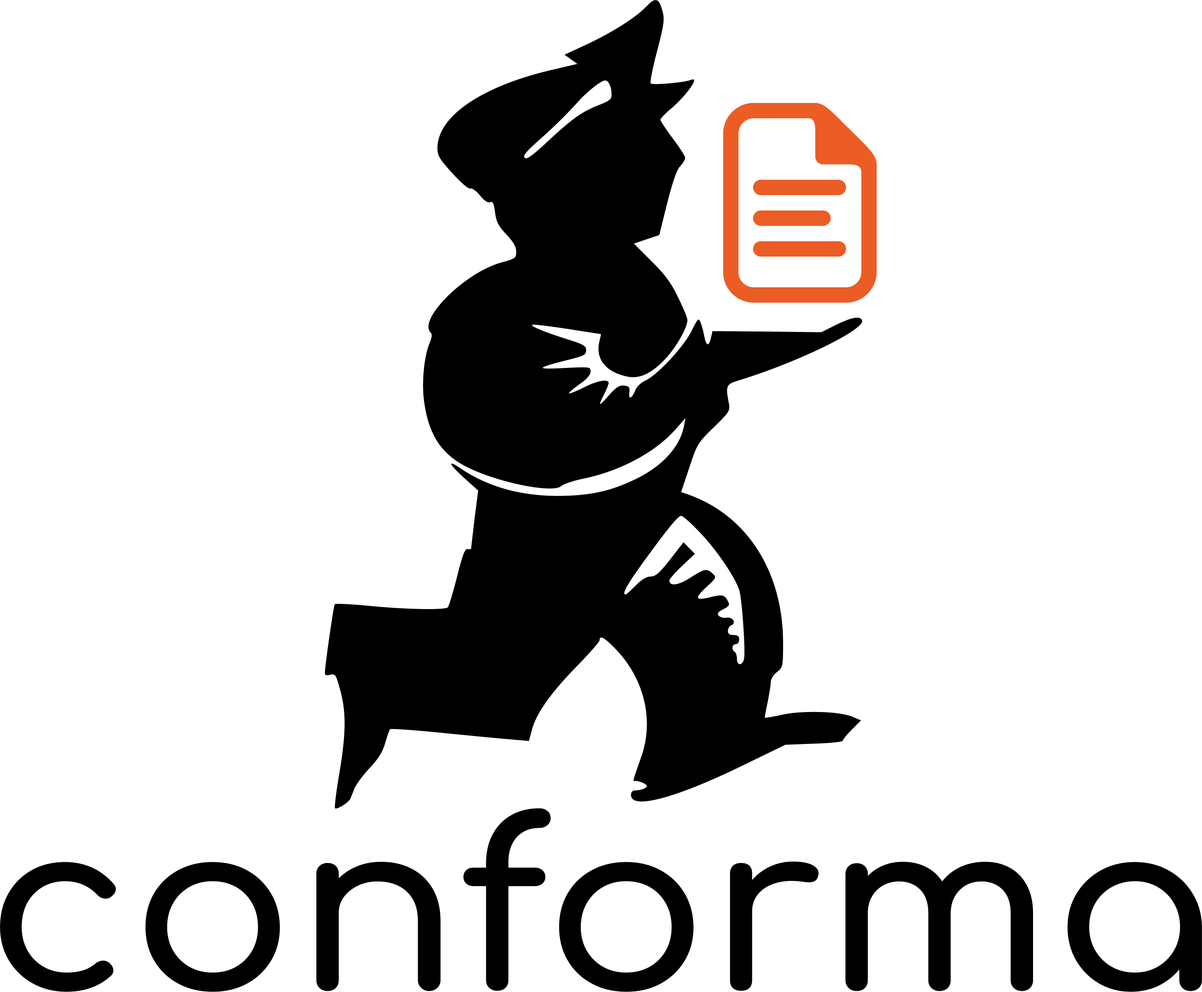
<style>
.page{position:relative;width:1202px;height:992px;background:#ffffff}
.page>*{position:absolute;margin:0}
.t1{font:233.6px "Comfortaa-SemiBold";color:#000000;scale:1.04 1}
</style>
<div class="page">
<p class="t1" style="left:0px;top:808px;width:1202px;height:184px">conforma</p>
</div>
